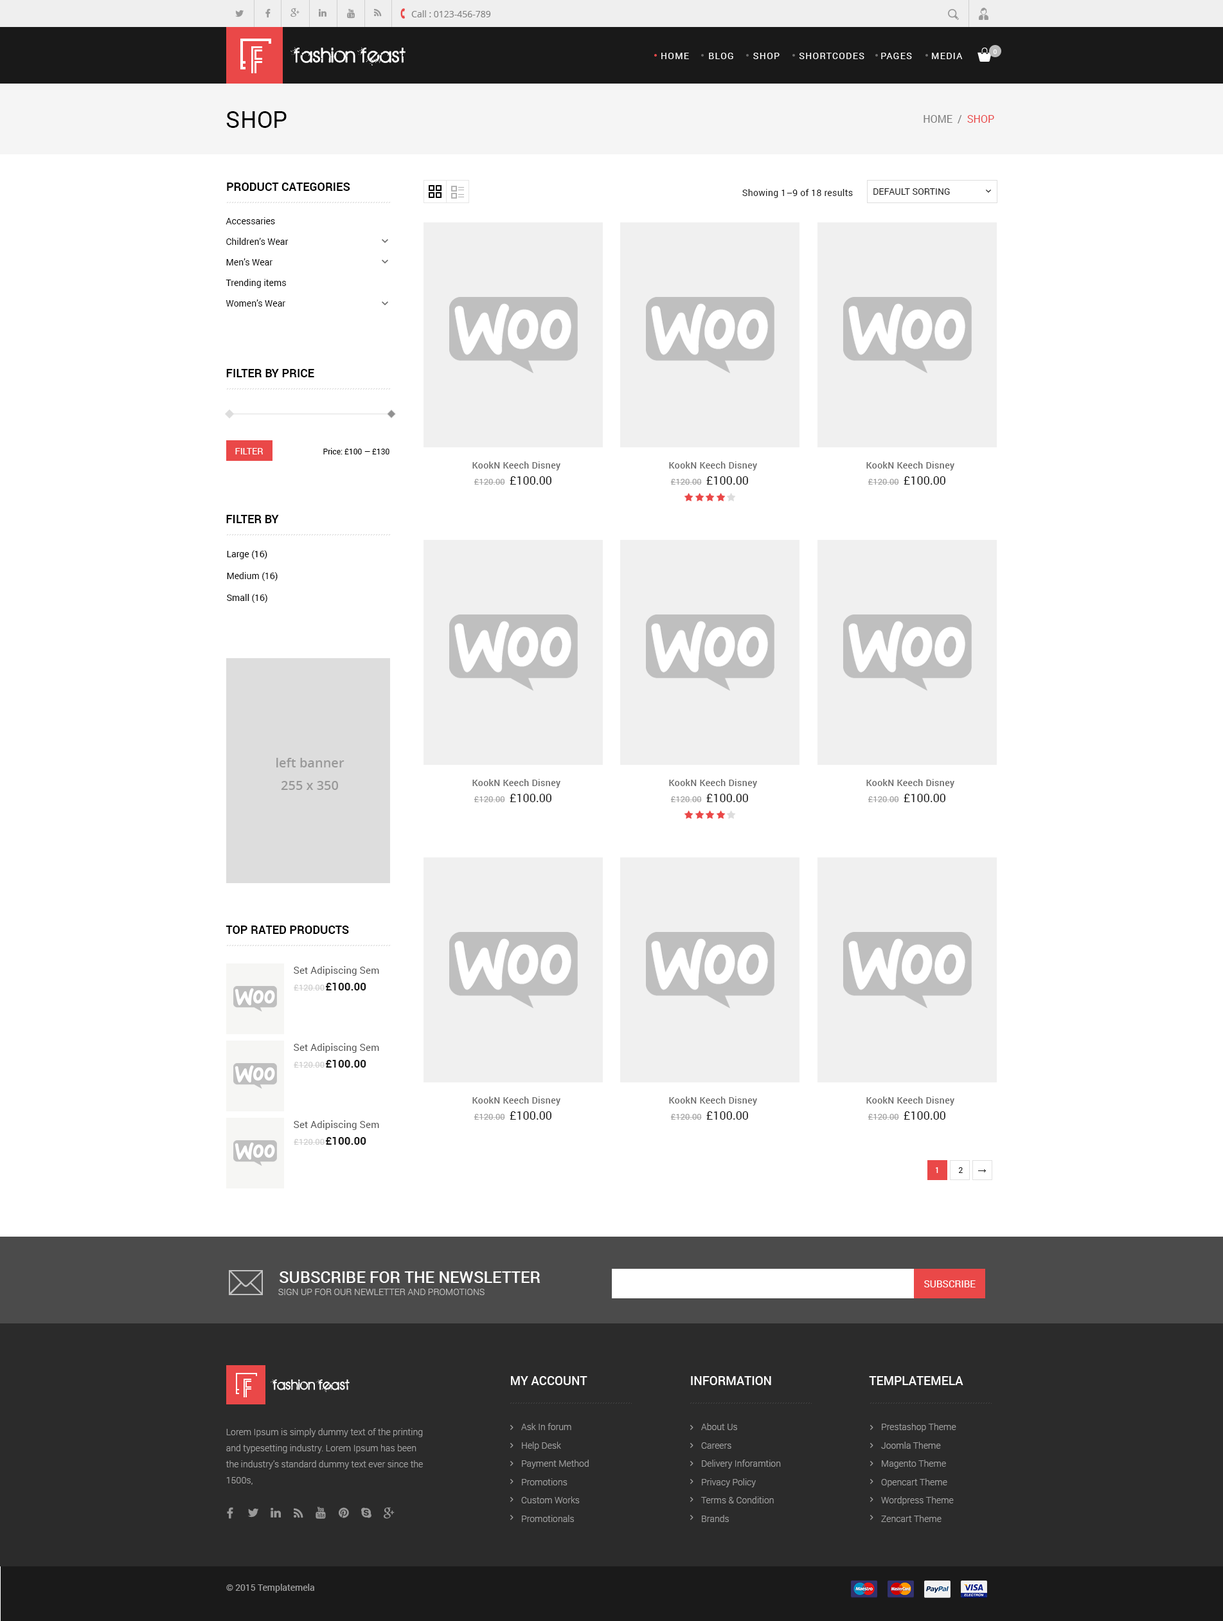
<style>
.page{position:relative;width:1223px;height:1621px;background:#ffffff}
.page>*{position:absolute;margin:0}
.t1{font:9px "OpenSans";color:#7e7e7e}
.t2{font:22.5px "BIRTHOFAHERO";letter-spacing:0.03em;color:#ffffff}
.t3{font:9px "Roboto-Regular";letter-spacing:0.095em;color:#ffffff;text-transform:uppercase}
.t4{font:6.4px "Roboto-Regular";letter-spacing:0.1em;color:#ffffff;text-transform:uppercase}
.t5{font:23.1px "Roboto-Regular";color:#000000;text-transform:uppercase}
.t6{font:10.3px "Roboto-Regular";color:#7b7b7b;text-transform:uppercase}
.t7{font:10.3px "Roboto-Regular";color:#ea4848;text-transform:uppercase}
.t8{font:11.6px "Roboto-Bold";color:#000000;text-transform:uppercase}
.t9{font:9px "Roboto-Regular";letter-spacing:0.02em;color:#191919}
.t10{font:9px "Roboto-Regular";color:#191919;text-transform:uppercase}
.t11{font:9px/20.6px "Roboto-Regular";color:#000000}
.t12{font:9px "Roboto-Regular";color:#ffffff;text-transform:uppercase}
.t13{font:7.7px "Roboto-Regular";color:#000000}
.t14{font:9px "Roboto-Medium";letter-spacing:0.03em;color:#676767}
.t15{font:8.4px "Roboto-Regular";color:#a1a1a1;text-transform:uppercase}
.t16{font:11.6px "Roboto-Regular";color:#191919;text-transform:uppercase}
.t17{font:9px/21.9px "Roboto-Regular";color:#000000}
.t18{font:12.9px "OpenSans-Semibold";color:#999999}
.t19{font:9.6px "Roboto-Regular";letter-spacing:0.01em;color:#555555}
.t20{font:8.4px "Roboto-Regular";color:#cdcdcd;text-transform:uppercase}
.t21{font:10.9px "Roboto-Bold";color:#191919;text-transform:uppercase}
.t22{font:7.7px "Roboto-Regular";color:#ffffff;text-transform:uppercase}
.t23{font:7.7px "Roboto-Regular";color:#191919;text-transform:uppercase}
.t24{font:16.1px "Roboto-Medium";color:#ffffff;text-transform:uppercase}
.t25{font:9px "Roboto-Light";color:#c3c3c2;text-transform:uppercase}
.t26{font:9.6px "Roboto-Regular";color:#ffffff;text-transform:uppercase}
.t27{font:15.4px "BIRTHOFAHERO";letter-spacing:0.03em;color:#ffffff}
.t28{font:12.2px "Roboto-Medium";color:#ffffff;text-transform:uppercase}
.t29{font:9px/16.1px "Roboto-Light";color:#a1a1a1}
.t30{font:9px/18.3px "Roboto-Light";color:#a1a1a1}
.t31{font:9px "Roboto-Regular";letter-spacing:-0.005em;color:#a1a1a1}
</style>
<div class="page">
<p class="t1" style="left:411px;top:10px;width:80px;height:7px">Call : 0123-456-789</p>
<p class="t2" style="left:291px;top:47px;width:115px;height:19px">fashion feast</p>
<p class="t3" style="left:662px;top:53px;width:301px;height:6px">Home      Blog      Shop      Shortcodes     Pages      Media</p>
<p class="t4" style="left:993px;top:50px;width:4px;height:4px">0</p>
<p class="t5" style="left:226px;top:111px;width:61px;height:17px">Shop</p>
<p class="t6" style="left:924px;top:115px;width:71px;height:8px">home  /  <span class="t7">Shop</span></p>
<p class="t8" style="left:227px;top:183px;width:123px;height:8px">Product Categories</p>
<p class="t9" style="left:742px;top:189px;width:111px;height:9px">Showing 1–9 of 18 results</p>
<p class="t10" style="left:874px;top:188px;width:76px;height:7px">Default sorting</p>
<p class="t11" style="left:226px;top:217px;width:63px;height:90px">Accessaries<br>Children’s Wear<br>Men’s Wear<br>Trending items<br>Women’s Wear</p>
<p class="t8" style="left:226px;top:369px;width:88px;height:8px">Filter by price</p>
<p class="t12" style="left:235px;top:448px;width:28px;height:7px">Filter</p>
<p class="t13" style="left:323px;top:448px;width:67px;height:7px">Price: £100 — £130</p>
<p class="t14" style="left:473px;top:462px;width:88px;height:9px">KookN Keech Disney</p>
<p class="t14" style="left:669px;top:462px;width:88px;height:9px">KookN Keech Disney</p>
<p class="t14" style="left:867px;top:462px;width:88px;height:9px">KookN Keech Disney</p>
<p class="t15" style="left:474px;top:476px;width:78px;height:9px">£120.00  <span class="t16">£100.00</span></p>
<p class="t15" style="left:670px;top:476px;width:78px;height:9px">£120.00  <span class="t16">£100.00</span></p>
<p class="t15" style="left:868px;top:476px;width:78px;height:9px">£120.00  <span class="t16">£100.00</span></p>
<p class="t8" style="left:226px;top:515px;width:53px;height:8px">Filter by</p>
<p class="t17" style="left:227px;top:550px;width:51px;height:53px">Large (16)<br>    Medium (16)<br>    Small (16)</p>
<p class="t18" style="left:276px;top:758px;width:69px;height:32px;text-align:center">left banner<br>255 x 350</p>
<p class="t14" style="left:473px;top:779px;width:88px;height:9px">KookN Keech Disney</p>
<p class="t14" style="left:669px;top:779px;width:88px;height:9px">KookN Keech Disney</p>
<p class="t14" style="left:867px;top:779px;width:88px;height:9px">KookN Keech Disney</p>
<p class="t15" style="left:474px;top:794px;width:78px;height:8px">£120.00  <span class="t16">£100.00</span></p>
<p class="t15" style="left:670px;top:794px;width:78px;height:8px">£120.00  <span class="t16">£100.00</span></p>
<p class="t15" style="left:868px;top:794px;width:78px;height:8px">£120.00  <span class="t16">£100.00</span></p>
<p class="t8" style="left:226px;top:926px;width:123px;height:8px">Top Rated Products</p>
<p class="t19" style="left:294px;top:966px;width:85px;height:10px">Set Adipiscing Sem</p>
<p class="t20" style="left:294px;top:985px;width:31px;height:6px">£120.00</p>
<p class="t21" style="left:326px;top:983px;width:40px;height:8px">£100.00</p>
<p class="t19" style="left:294px;top:1043px;width:85px;height:10px">Set Adipiscing Sem</p>
<p class="t20" style="left:294px;top:1062px;width:31px;height:6px">£120.00</p>
<p class="t21" style="left:326px;top:1060px;width:40px;height:8px">£100.00</p>
<p class="t14" style="left:473px;top:1097px;width:88px;height:9px">KookN Keech Disney</p>
<p class="t14" style="left:669px;top:1097px;width:88px;height:9px">KookN Keech Disney</p>
<p class="t14" style="left:867px;top:1097px;width:88px;height:9px">KookN Keech Disney</p>
<p class="t19" style="left:294px;top:1120px;width:85px;height:10px">Set Adipiscing Sem</p>
<p class="t15" style="left:474px;top:1112px;width:78px;height:8px">£120.00  <span class="t16">£100.00</span></p>
<p class="t15" style="left:670px;top:1112px;width:78px;height:8px">£120.00  <span class="t16">£100.00</span></p>
<p class="t15" style="left:868px;top:1112px;width:78px;height:8px">£120.00  <span class="t16">£100.00</span></p>
<p class="t20" style="left:294px;top:1139px;width:31px;height:6px">£120.00</p>
<p class="t21" style="left:326px;top:1137px;width:40px;height:8px">£100.00</p>
<p class="t22" style="left:936px;top:1167px;width:27px;height:6px">1<span class="t23">          2</span></p>
<p class="t24" style="left:280px;top:1272px;width:261px;height:11px">subscribe for the newsletter</p>
<p class="t25" style="left:278px;top:1289px;width:207px;height:6px">sign up for our newletter and promotions</p>
<p class="t26" style="left:924px;top:1281px;width:52px;height:7px">subscribe</p>
<p class="t27" style="left:271px;top:1380px;width:79px;height:12px">fashion feast</p>
<p class="t28" style="left:511px;top:1376px;width:77px;height:9px">My Account</p>
<p class="t28" style="left:691px;top:1376px;width:80px;height:9px">Information</p>
<p class="t28" style="left:869px;top:1376px;width:95px;height:9px">TemplateMela</p>
<p class="t29" style="left:226px;top:1428px;width:197px;height:57px">Lorem Ipsum is simply dummy text of the printing <br>and typesetting industry. Lorem Ipsum has been <br>the industry’s standard dummy text ever since the <br>1500s,</p>
<p class="t30" style="left:521px;top:1423px;width:68px;height:99px">Ask In forum <br>Help Desk <br>Payment Method <br>Promotions <br>Custom Works <br>Promotionals</p>
<p class="t30" style="left:701px;top:1423px;width:80px;height:99px">About Us <br>Careers <br>Delivery Inforamtion <br>Privacy Policy <br>Terms &amp; Condition <br>Brands</p>
<p class="t30" style="left:881px;top:1423px;width:76px;height:99px">Prestashop Theme <br>Joomla Theme <br>Magento Theme <br>Opencart Theme <br>Wordpress Theme <br>Zencart Theme</p>
<p class="t31" style="left:226px;top:1584px;width:88px;height:9px">© 2015 Templatemela</p>
</div>
